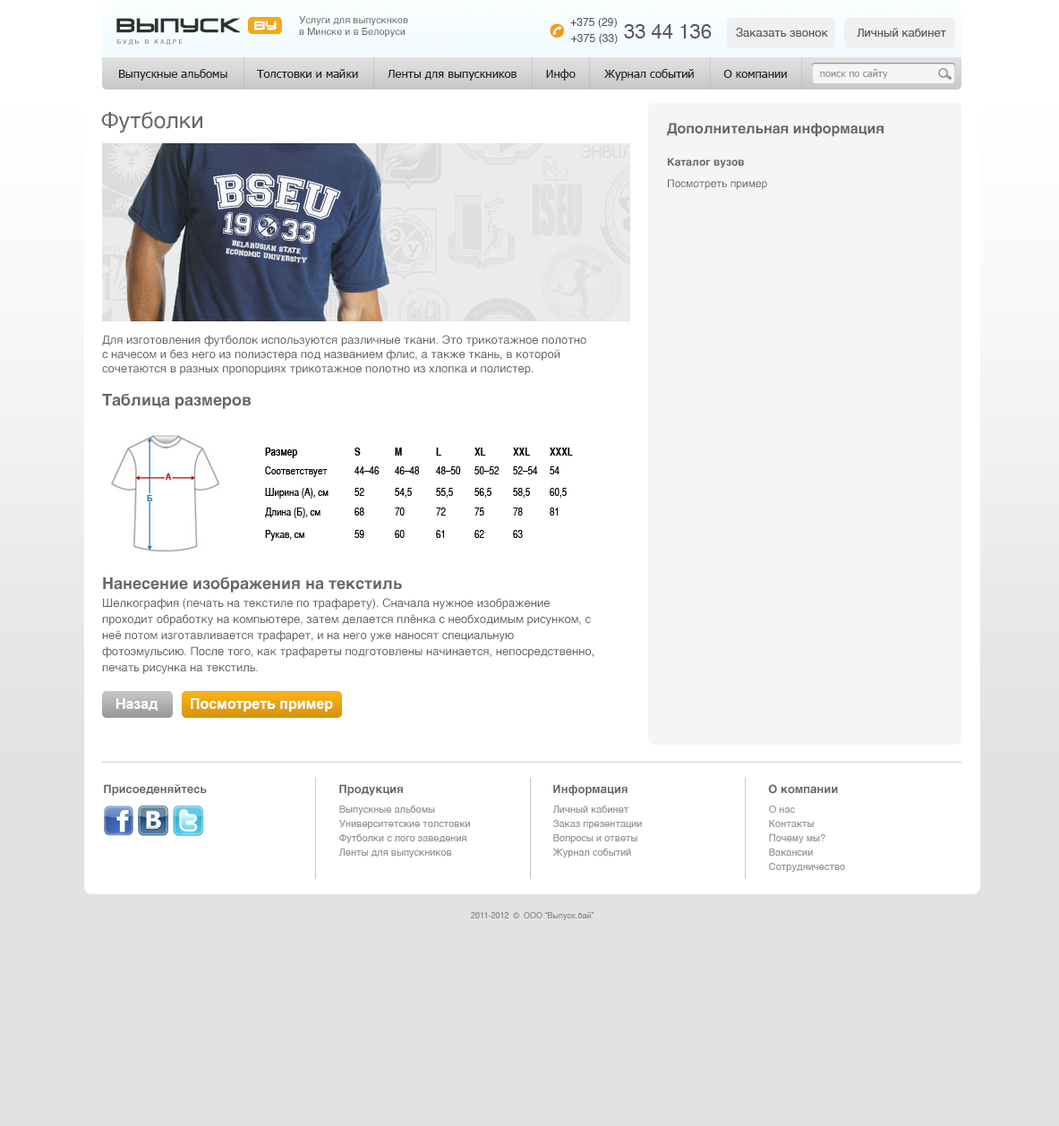
<style>
.page{position:relative;width:1059px;height:1126px;background:#ffffff}
.page>*{position:absolute;margin:0}
.t1{font:18.8px "VenusRisingCyrillic";letter-spacing:0.01em;color:#313131;font-weight:bold}
.t2{font:9.8px "Helvetica";color:#616161}
.t3{font:10.7px "Helvetica";letter-spacing:0.01em;color:#5f5555}
.t4{font:11.3px "VenusRisingCyrillic";letter-spacing:0.01em;color:#ffffff;font-weight:bold}
.t5{font:19.7px "Helvetica";color:#5f5555}
.t6{font:11.6px "Helvetica";color:#5f5555}
.t7{font:6.3px "Helvetica";letter-spacing:0.3em;color:#6d6d6d;text-transform:uppercase}
.t8{font:11.6px "Tahoma";color:#242424}
.t9{font:9.8px "Tahoma";color:#979999}
.t10{font:22.4px "Helvetica";color:#666666}
.t11{font:14.3px "Helvetica-Bold";color:#666666}
.t12{font:10.7px/32.2px "Helvetica-Bold";color:#666666}
.t13{font:10.7px/21.5px "Helvetica";color:#666666}
.t14{font:11.6px "Helvetica";color:#666666}
.t15{font:11.6px/21.5px "Helvetica";color:#666666}
.t16{font:16.1px "Helvetica-Bold";color:#666666}
.t17{font:11.6px/16.1px "Helvetica";color:#666666}
.t18{font:14.3px "Arial-BoldMT";color:#fdfdfe}
.t19{font:11.6px "Helvetica-Bold";color:#666666}
.t20{font:9.8px/14.3px "Helvetica";color:#979797}
.t21{font:8.1px "Helvetica";color:#909090}
</style>
<div class="page">
<p class="t1" style="left:116px;top:18px;width:125px;height:15px">ВЫпуск</p>
<p class="t2" style="left:299px;top:16px;width:109px;height:22px">Услуги для выпускнков<br>в Минске и в Белоруси</p>
<p class="t3" style="left:570px;top:18px;width:47px;height:10px">+375 (29)</p>
<p class="t4" style="left:254px;top:21px;width:23px;height:9px">by</p>
<p class="t5" style="left:624px;top:24px;width:88px;height:14px">33 44 136</p>
<p class="t6" style="left:736px;top:28px;width:210px;height:9px">Заказать звонок         Личный кабинет</p>
<p class="t7" style="left:116px;top:39px;width:67px;height:6px">будь в кадре</p>
<p class="t3" style="left:571px;top:34px;width:47px;height:10px">+375 (33)</p>
<p class="t8" style="left:119px;top:69px;width:668px;height:12px">Выпускные альбомы        Толстовки и майки        Ленты для выпускников        Инфо        Журнал событий        О компании</p>
<p class="t9" style="left:820px;top:69px;width:68px;height:10px">поиск по сайту</p>
<p class="t10" style="left:101px;top:111px;width:101px;height:22px">Футболки</p>
<p class="t11" style="left:667px;top:123px;width:216px;height:67px">Дополнительная информация<br><span class="t12">Каталог вузов<br></span><span class="t13">Посмотреть пример</span></p>
<p class="t14" style="left:102px;top:335px;width:484px;height:40px"><span class="t15">Для изготовления футболок используются различные </span>ткани. Это трикотажное полотно <br>с начесом и без него из полиэстера под названием флис, а также ткань, в которой <br>сочетаются в разных пропорциях трикотажное полотно из хлопка и полистер.</p>
<p class="t16" style="left:102px;top:394px;width:149px;height:15px">Таблица размеров</p>
<p class="t16" style="left:103px;top:577px;width:299px;height:16px">Нанесение изображения на текстиль</p>
<p class="t17" style="left:102px;top:598px;width:491px;height:76px">Шелкография (печать на текстиле по трафарету). Сначала нужное изображение проходит обработку на компьютере, затем делается плёнка с необходимым рисунком, с неё потом изготавливается трафарет, и на него уже наносят специальную фотоэмульсию. После того, как трафареты подготовлены начинается, непосредственно, печать рисунка на текстиль.</p>
<p class="t18" style="left:115px;top:698px;width:43px;height:13px">Назад</p>
<p class="t18" style="left:191px;top:698px;width:142px;height:14px">Посмотреть пример</p>
<p class="t19" style="left:104px;top:784px;width:103px;height:12px">Присоеденяйтесь</p>
<p class="t19" style="left:339px;top:784px;width:64px;height:12px">Продукция</p>
<p class="t19" style="left:553px;top:784px;width:74px;height:12px">Информация</p>
<p class="t19" style="left:768px;top:784px;width:70px;height:10px">О компании</p>
<p class="t20" style="left:338px;top:806px;width:132px;height:52px">Выпускные альбомы<br>Университетские толстовки<br>Футболки с лого заведения<br>Ленты для выпускников</p>
<p class="t20" style="left:552px;top:806px;width:90px;height:52px">Личный кабинет<br>Заказ презентации<br>Вопросы и ответы<br>Журнал событий</p>
<p class="t20" style="left:769px;top:806px;width:76px;height:66px">О нас<br>Контакты<br>Почему мы? <br>Вакансии<br>Сотрудничество</p>
<p class="t21" style="left:471px;top:912px;width:123px;height:8px">2011-2012  ©  ООО “Выпуск.бай”</p>
</div>
